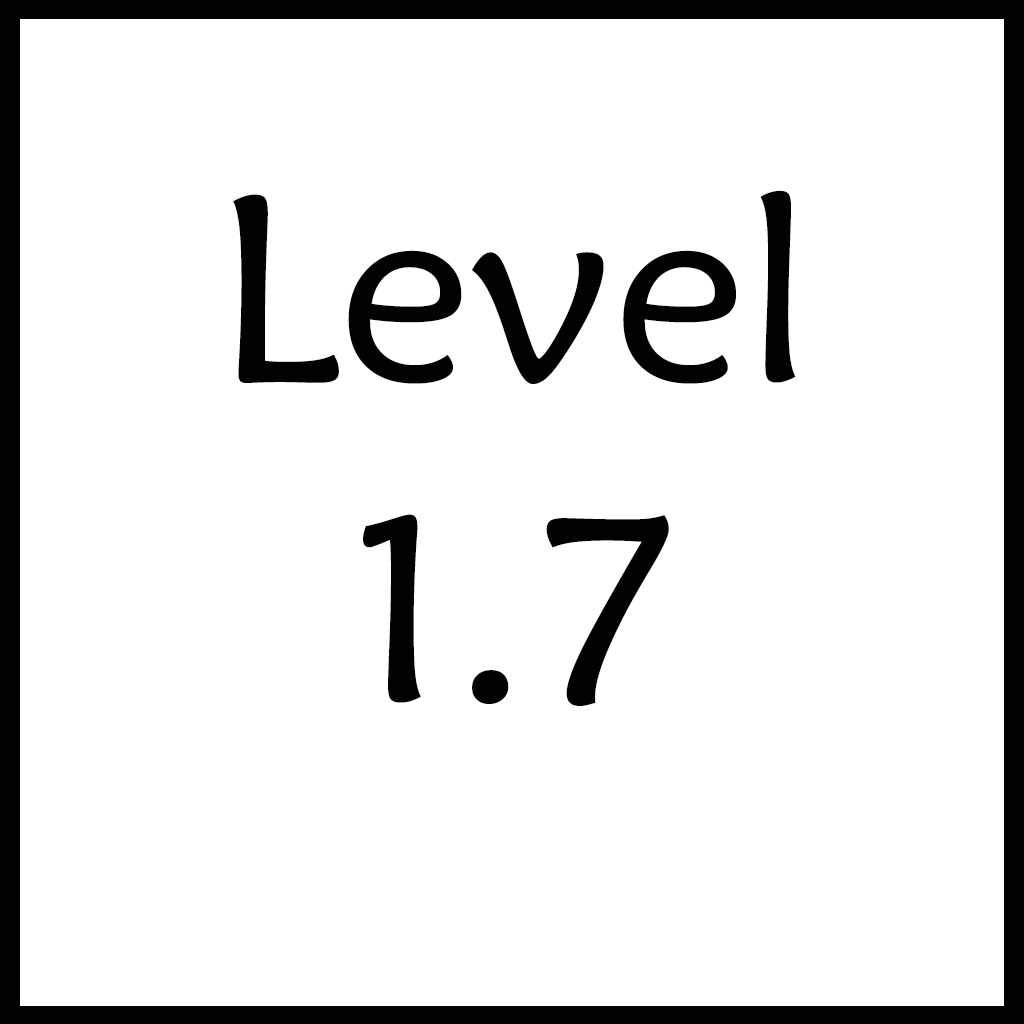
<style>
.page{position:relative;width:1024px;height:1024px;background:#ffffff}
.page>*{position:absolute;margin:0}
.t1{font:266.7px "MaiandraGD-Regular";color:#020202}
</style>
<div class="page">
<p class="t1" style="left:233px;top:190px;width:563px;height:516px;text-align:center">Level <br>1.7</p>
</div>
